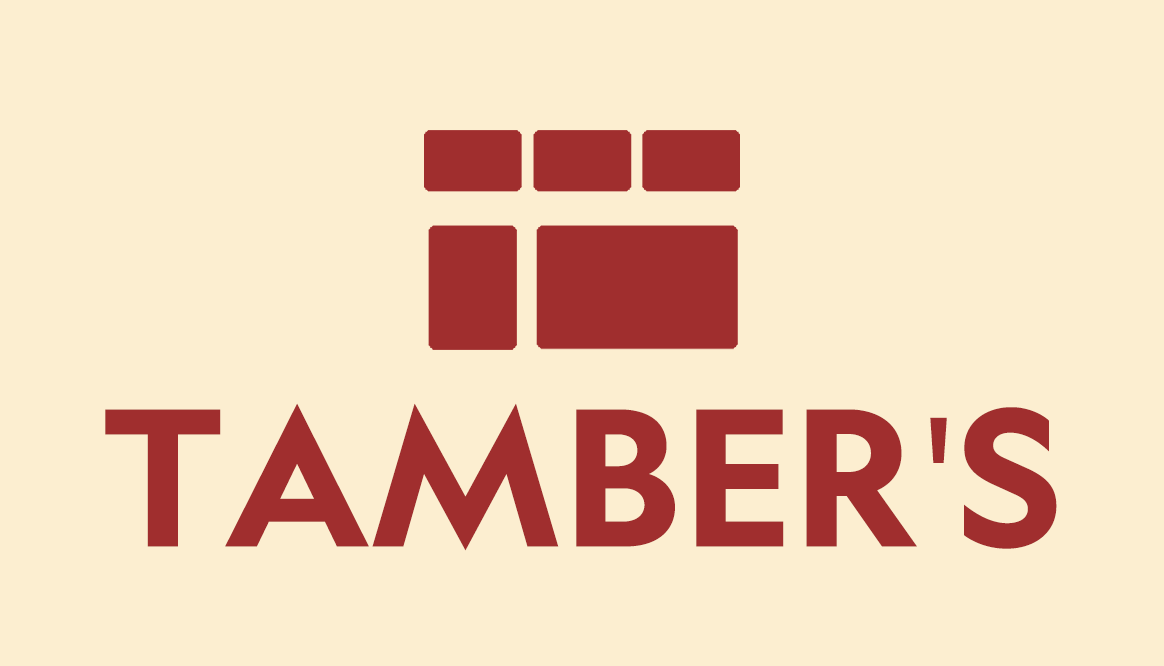
<style>
.page{position:relative;width:1164px;height:666px;background:#fceed0}
.page>*{position:absolute;margin:0}
.t1{font:187.5px "Geograph-BoldTest";letter-spacing:0.01em;color:#a02e2e}
.t2{font:187.5px "MyriadPro-Regular";letter-spacing:0.01em;color:#a02e2e}
</style>
<div class="page">
<p class="t1" style="left:105px;top:403px;width:952px;height:148px">TAMBER<span class="t2">'</span>S</p>
</div>
